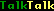
<style>
.page{position:relative;width:54px;height:11px;background:#000000}
.page>*{position:absolute;margin:0}
.t1{font:13.2px "Onesize";color:#009900;scale:0.91 1}
.t2{font:13.2px "Onesize";color:#ffff66;scale:0.91 1}
</style>
<div class="page">
<p class="t1" style="left:0px;top:1px;width:27px;height:8px">Talk</p>
<p class="t2" style="left:27px;top:1px;width:27px;height:8px">Talk</p>
</div>
